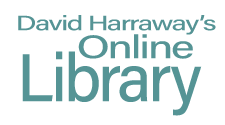
<style>
.page{position:relative;width:225px;height:125px;background:#ffffff}
.page>*{position:absolute;margin:0}
.t1{font:20.8px "AcuminConcept-Medium";letter-spacing:-0.05em;color:#559495;font-style:italic;scale:1.38 1}
.t2{font:32.9px "AcuminConcept-Medium";letter-spacing:-0.05em;color:#559495;font-style:italic;scale:1.35 1}
.t3{font:67.7px "AcuminConcept-Medium";letter-spacing:-0.05em;color:#559495;font-style:italic;scale:0.96 1}
</style>
<div class="page">
<p class="t1" style="left:18px;top:15px;width:198px;height:20px">David Harraway’s</p>
<p class="t2" style="left:78px;top:34px;width:115px;height:25px">Online</p>
<p class="t3" style="left:22px;top:51px;width:180px;height:65px">Library</p>
</div>
